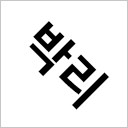
<style>
.page{position:relative;width:128px;height:128px;background:#ffffff}
.page>*{position:absolute;margin:0}
.t1{font:50px "NotoSansCJKkr-Bold";letter-spacing:-0.025em;color:#000000}
</style>
<div class="page">
<p class="t1" style="left:29px;top:21px;width:81px;height:89px;rotate:45deg">박리</p>
</div>
